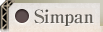
<style>
.page{position:relative;width:103px;height:32px}
.page>*{position:absolute;margin:0}
.t1{font:18px "RyuminPro-ExBold";letter-spacing:-0.04em;color:#605c55}
</style>
<div class="page">
<p class="t1" style="left:34px;top:9px;width:60px;height:17px">Simpan</p>
</div>
